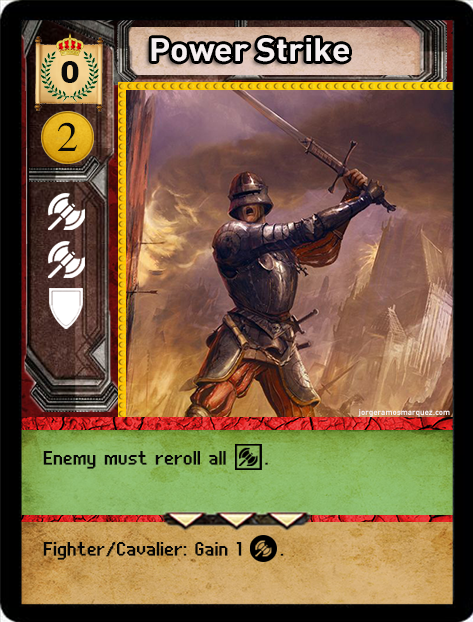
<style>
.page{position:relative;width:473px;height:622px}
.page>*{position:absolute;margin:0}
.t1{font:32px "DIN-Bold";color:#f6eff0;scale:1.06 1}
.t2{font:32px "Swiss721BT-Heavy";color:#090909}
.t3{font:40px "SimplifiedArabic";color:#090909;scale:1.05 1}
.t4{font:8px "DIN-Bold";color:#f6eff0}
.t5{font:24px "UNDA-BitmapFine";letter-spacing:0.01em;color:#060606;font-weight:bold}
</style>
<div class="page">
<p class="t1" style="left:151px;top:38px;width:198px;height:24px">Power Strike</p>
<p class="t2" style="left:61px;top:61px;width:18px;height:22px">0</p>
<p class="t3" style="left:58px;top:122px;width:19px;height:29px">2</p>
<p class="t4" style="left:358px;top:409px;width:92px;height:8px">jorgeramosmarquez.com</p>
<p class="t5" style="left:43px;top:451px;width:225px;height:18px">Enemy must reroll all     .</p>
<p class="t5" style="left:43px;top:542px;width:241px;height:18px">Fighter/Cavalier: Gain 1     .</p>
</div>
